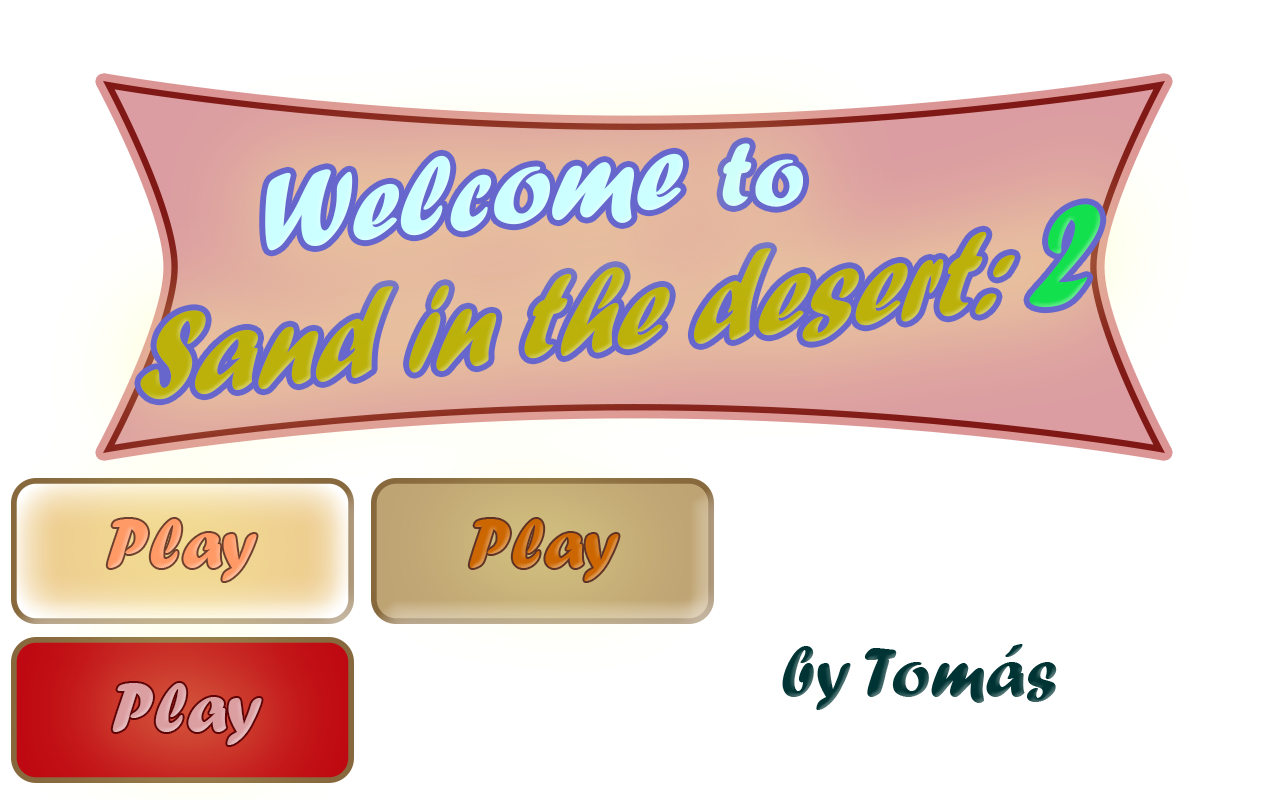
<style>
.page{position:relative;width:1280px;height:800px;background:#ffffff}
.page>*{position:absolute;margin:0}
.t1{font:95.8px "ForteMT";color:#ccffff}
.t2{font:114.3px "ForteMT";color:#ccffff}
.t3{font:130px "ForteMT";color:#bbb10a;scale:0.86 1}
.t4{font:160px "ForteMT";color:#13e04d;scale:0.86 1}
.t5{font:72px "ForteMT";color:#ff9966}
.t6{font:72px "ForteMT";color:#cc6600}
.t7{font:72px "ForteMT";color:#003333}
.t8{font:72px "ForteMT";color:#db9ea1}
</style>
<div class="page">
<p class="t1" style="left:722px;top:143px;width:81px;height:64px;rotate:-1deg">to</p>
<p class="t2" style="left:265px;top:153px;width:418px;height:98px;rotate:-6deg">Welcome</p>
<p class="t3" style="left:140px;top:204px;width:961px;height:196px;rotate:-6deg">Sand in the desert: <span class="t4">2</span></p>
<p class="t5" style="left:107px;top:519px;width:150px;height:62px">Play</p>
<p class="t6" style="left:469px;top:519px;width:150px;height:62px">Play</p>
<p class="t7" style="left:782px;top:644px;width:275px;height:66px">by Tomás</p>
<p class="t8" style="left:112px;top:683px;width:150px;height:62px">Play</p>
</div>
